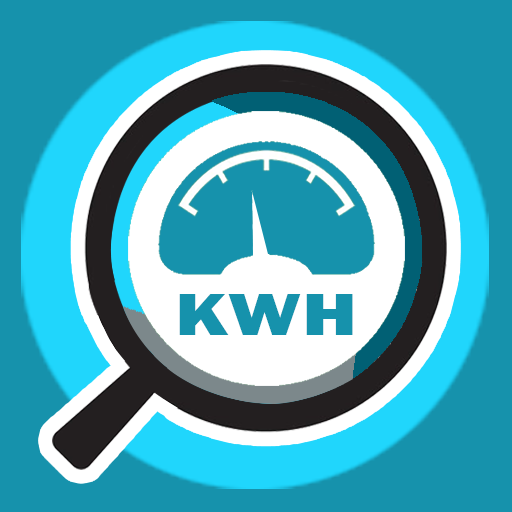
<style>
.page{position:relative;width:512px;height:512px;background:#1692ac}
.page>*{position:absolute;margin:0}
.t1{font:61.4px "FranklinGothic-Heavy";color:#1692ac;scale:1.33 1}
</style>
<div class="page">
<p class="t1" style="left:179px;top:294px;width:174px;height:41px">KWH</p>
</div>
